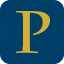
<style>
.page{position:relative;width:64px;height:64px;background:#004068}
.page>*{position:absolute;margin:0}
.t1{font:60px "CharlemagneStd-Bold";color:#d4af37;text-transform:uppercase}
</style>
<div class="page">
<p class="t1" style="left:16px;top:11px;width:34px;height:42px">P</p>
</div>
